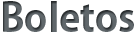
<style>
.page{position:relative;width:134px;height:38px;background:#ffffff}
.page>*{position:absolute;margin:0}
.t1{font:39.1px "AdobeGothicStd-Bold";color:#60676b}
</style>
<div class="page">
<p class="t1" style="left:3px;top:1px;width:131px;height:31px">Boletos</p>
</div>
